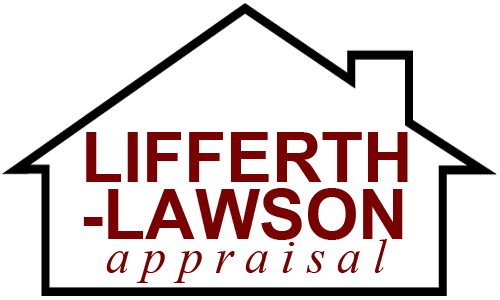
<style>
.page{position:relative;width:500px;height:300px;background:#ffffff}
.page>*{position:absolute;margin:0}
.t1{font:68.5px "Arial-BoldMT";color:#790000}
.t2{font:48px "TimesNewRomanPS-ItalicMT";letter-spacing:0.25em;color:#790000}
</style>
<div class="page">
<p class="t1" style="left:86px;top:132px;width:322px;height:50px">LIFFERTH</p>
<p class="t1" style="left:83px;top:188px;width:320px;height:52px">-LAWSON</p>
<p class="t2" style="left:106px;top:239px;width:281px;height:44px">appraisal</p>
</div>
